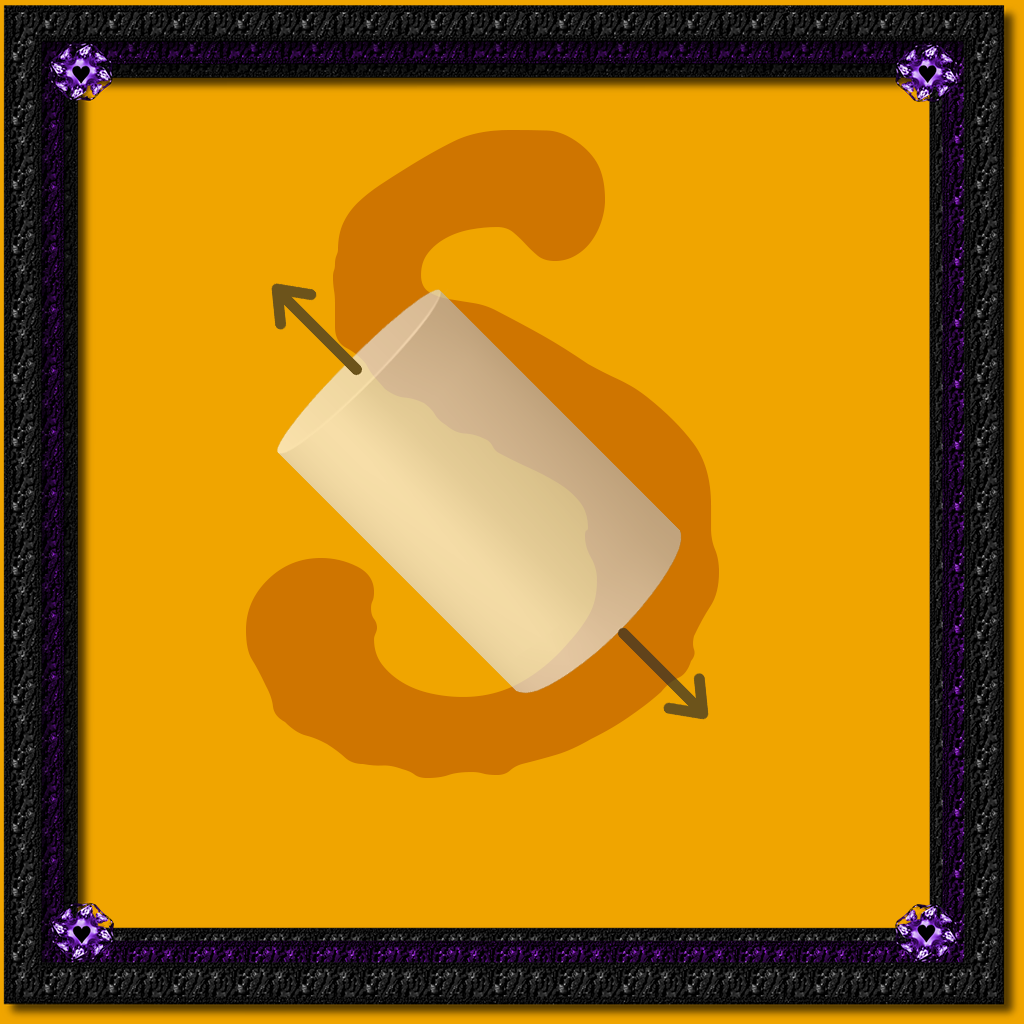
<style>
.page{position:relative;width:1024px;height:1024px;background:#f0a500}
.page>*{position:absolute;margin:0}
.t1{font:1000px "Trattatello";letter-spacing:-0.025em;color:#cf7500}
</style>
<div class="page">
<p class="t1" style="left:246px;top:130px;width:473px;height:648px">S</p>
</div>
